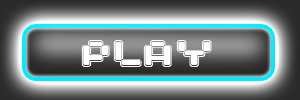
<style>
.page{position:relative;width:300px;height:100px}
.page>*{position:absolute;margin:0}
.t1{font:26.4px "Spaceboy";color:#ffffff;scale:1.3 1}
</style>
<div class="page">
<p class="t1" style="left:81px;top:40px;width:131px;height:27px">Play</p>
</div>
